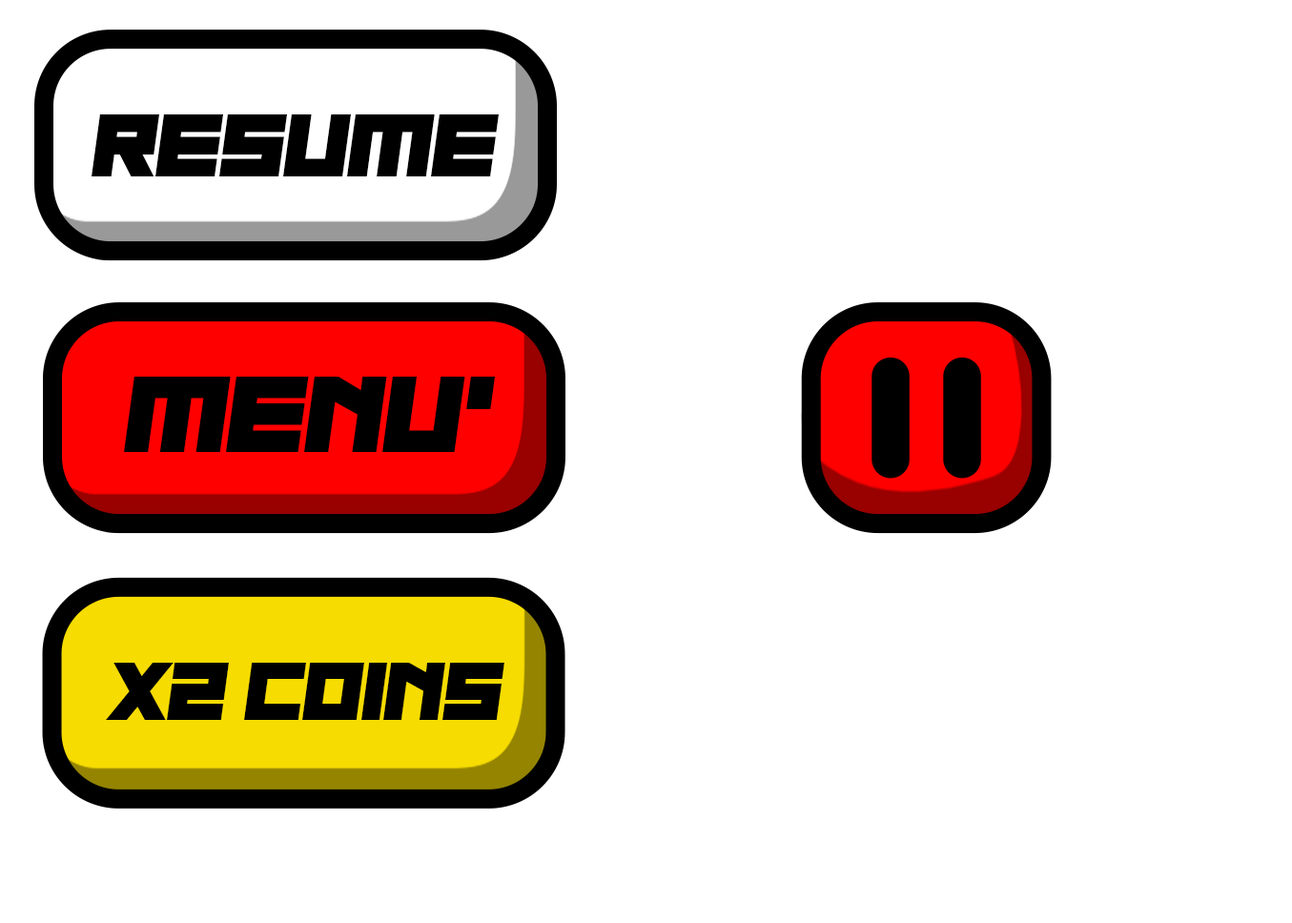
<style>
.page{position:relative;width:1292px;height:923px;background:#ffffff}
.page>*{position:absolute;margin:0}
.t1{font:90.8px "NauSea";color:#000000;scale:1.11 1}
.t2{font:110.9px "NauSea";color:#000000;scale:1.11 1}
.t3{font:83.4px "NauSea";color:#000000;scale:1.11 1}
</style>
<div class="page">
<p class="t1" style="left:92px;top:114px;width:408px;height:62px">resume</p>
<p class="t2" style="left:124px;top:377px;width:372px;height:75px">menu'</p>
<p class="t3" style="left:106px;top:663px;width:398px;height:57px">x2 coins</p>
</div>
